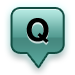
<style>
.page{position:relative;width:75px;height:75px;background:#ffffff}
.page>*{position:absolute;margin:0}
.t1{font:31.3px "HelveticaNeue-Bold";color:#000000}
</style>
<div class="page">
<p class="t1" style="left:26px;top:18px;width:23px;height:25px">Q</p>
</div>
